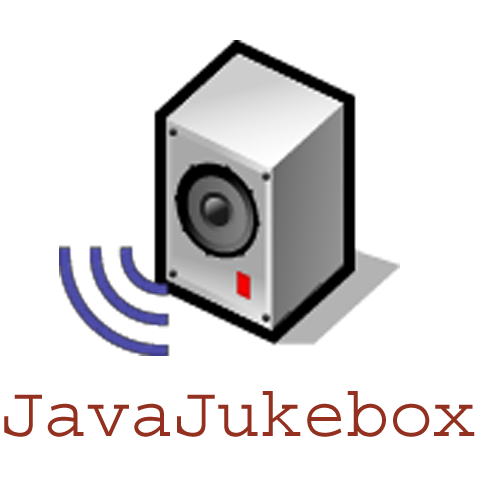
<style>
.page{position:relative;width:480px;height:480px;background:#ffffff}
.page>*{position:absolute;margin:0}
.t1{font:72px "Courier";color:#943020}
</style>
<div class="page">
<p class="t1" style="left:4px;top:391px;width:471px;height:46px">JavaJukebox</p>
</div>
